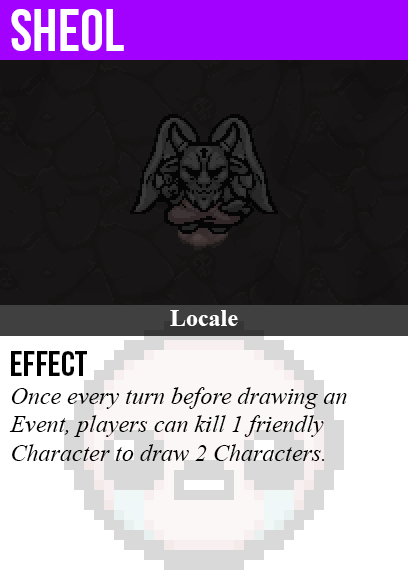
<style>
.page{position:relative;width:408px;height:585px;background:#ffffff}
.page>*{position:absolute;margin:0}
.t1{font:60px "BebasNeue";color:#ffffff}
.t2{font:24px "TimesNewRomanPS-BoldMT";color:#ffffff}
.t3{font:36px "BebasNeue";color:#000000}
.t4{font:24px "TimesNewRomanPS-ItalicMT";color:#000000}
</style>
<div class="page">
<p class="t1" style="left:11px;top:9px;width:113px;height:42px">sheol</p>
<p class="t2" style="left:170px;top:310px;width:68px;height:16px">Locale</p>
<p class="t3" style="left:11px;top:351px;width:76px;height:25px">Effect</p>
<p class="t4" style="left:9px;top:387px;width:338px;height:74px">Once every turn before drawing an<br>Event, players can kill 1 friendly<br>Character to draw 2 Characters.</p>
</div>
